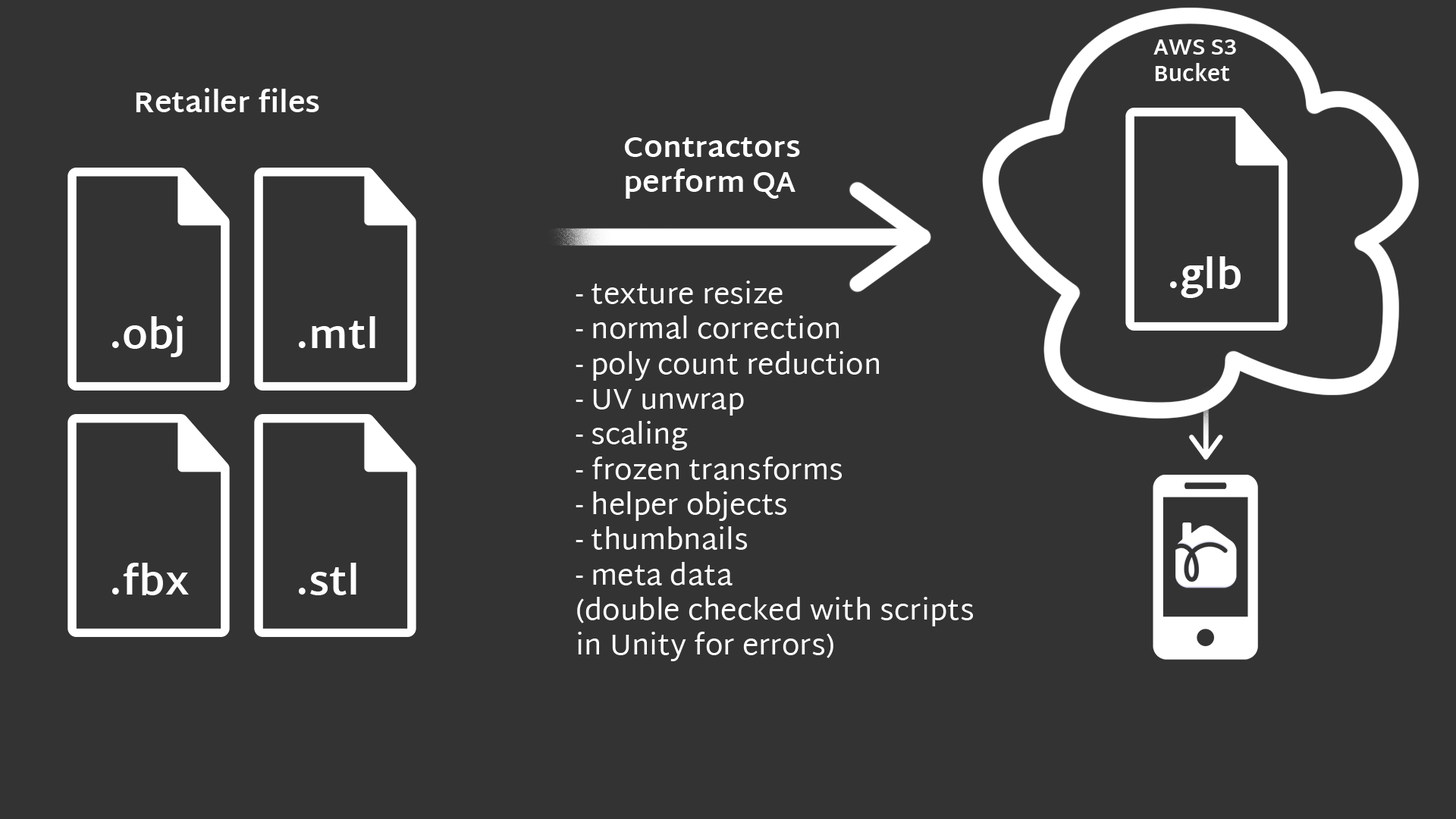
<style>
.page{position:relative;width:1456px;height:819px;background:#333333}
.page>*{position:absolute;margin:0}
.t1{font:22px "MartelSans-Bold";color:#ffffff}
.t2{font:29.3px "MartelSans-Bold";color:#ffffff}
.t3{font:40px "MartelSans-Bold";color:#ffffff}
.t4{font:29.3px "MartelSans-Regular";color:#ffffff}
</style>
<div class="page">
<p class="t1" style="left:1153px;top:39px;width:83px;height:42px">AWS S3<br>Bucket</p>
<p class="t2" style="left:136px;top:88px;width:183px;height:24px">Retailer files</p>
<p class="t2" style="left:624px;top:137px;width:176px;height:62px">Contractors<br>perform QA</p>
<p class="t3" style="left:1170px;top:256px;width:71px;height:42px">.glb</p>
<p class="t4" style="left:576px;top:281px;width:397px;height:380px">- texture resize<br>- normal correction<br>- poly count reduction<br>- UV unwrap<br>- scaling<br>- frozen transforms<br>- helper objects<br>- thumbnails<br>- meta data<br>(double checked with scripts<br>in Unity for errors)</p>
<p class="t3" style="left:112px;top:315px;width:72px;height:42px">.obj</p>
<p class="t3" style="left:299px;top:316px;width:76px;height:33px">.mtl</p>
<p class="t3" style="left:112px;top:563px;width:77px;height:32px">.fbx</p>
<p class="t3" style="left:299px;top:563px;width:57px;height:32px">.stl</p>
</div>
